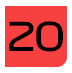
<style>
.page{position:relative;width:72px;height:73px;background:#f74040}
.page>*{position:absolute;margin:0}
.t1{font:38.9px "Formula1-Display-Regular";color:#000000}
</style>
<div class="page">
<p class="t1" style="left:9px;top:21px;width:54px;height:31px">20</p>
</div>
